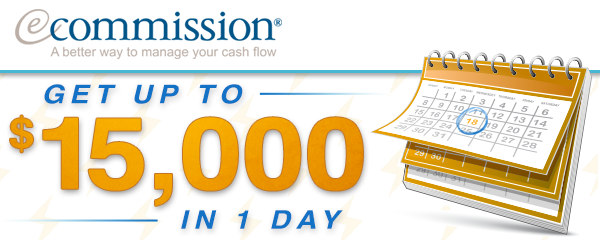
<style>
.page{position:relative;width:600px;height:240px;background:#ffffff}
.page>*{position:absolute;margin:0}
.t1{font:25.7px "Helvetica-BoldOblique";letter-spacing:0.2em;color:#1372c5;text-transform:uppercase;scale:1.12 1}
.t2{font:100px "Helvetica-Bold";color:#ef9f00;scale:1.12 1}
.t3{font:41.4px "Helvetica-Bold";color:#ef9f00;scale:1.12 1}
</style>
<div class="page">
<p class="t1" style="left:44px;top:84px;width:199px;height:20px">Get Up to</p>
<p class="t2" style="left:10px;top:115px;width:353px;height:91px"><span class="t3">$</span>15,000</p>
<p class="t1" style="left:181px;top:210px;width:162px;height:19px">in 1 Day</p>
</div>
